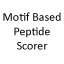
<style>
.page{position:relative;width:64px;height:64px;background:#ffffff}
.page>*{position:absolute;margin:0}
.t1{font:12px "Calibri";color:#000000}
</style>
<div class="page">
<p class="t1" style="left:3px;top:12px;width:58px;height:38px;text-align:center">Motif Based<br>Peptide<br>Scorer</p>
</div>
